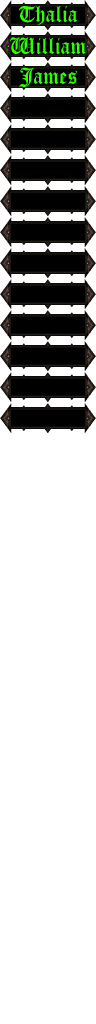
<style>
.page{position:relative;width:96px;height:1024px;background:#ffffff}
.page>*{position:absolute;margin:0}
.t1{font:24px "CloisterBlack-Light";color:#30ff00}
</style>
<div class="page">
<p class="t1" style="left:19px;top:6px;width:58px;height:19px">Thalia</p>
<p class="t1" style="left:10px;top:37px;width:76px;height:18px">William</p>
<p class="t1" style="left:19px;top:67px;width:58px;height:21px">James</p>
</div>
